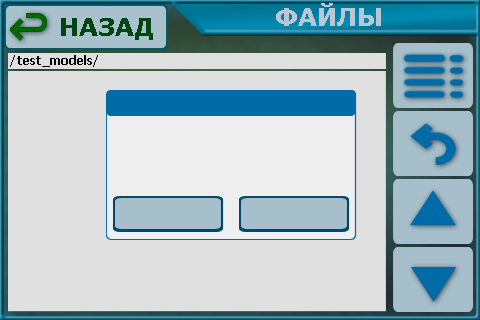
<style>
.page{position:relative;width:480px;height:320px;background:#e0e0e0}
.page>*{position:absolute;margin:0}
.t1{font:24px "Verdana-Bold";color:#bac5d5}
.t2{font:24px "Verdana-Bold";color:#004612}
.t3{font:12px "Tahoma-Bold";color:#000000}
</style>
<div class="page">
<p class="t1" style="left:276px;top:3px;width:105px;height:23px">ФАЙЛЫ</p>
<p class="t2" style="left:61px;top:18px;width:92px;height:22px">НАЗАД</p>
<p class="t3" style="left:10px;top:55px;width:88px;height:12px">/test_models/</p>
</div>
